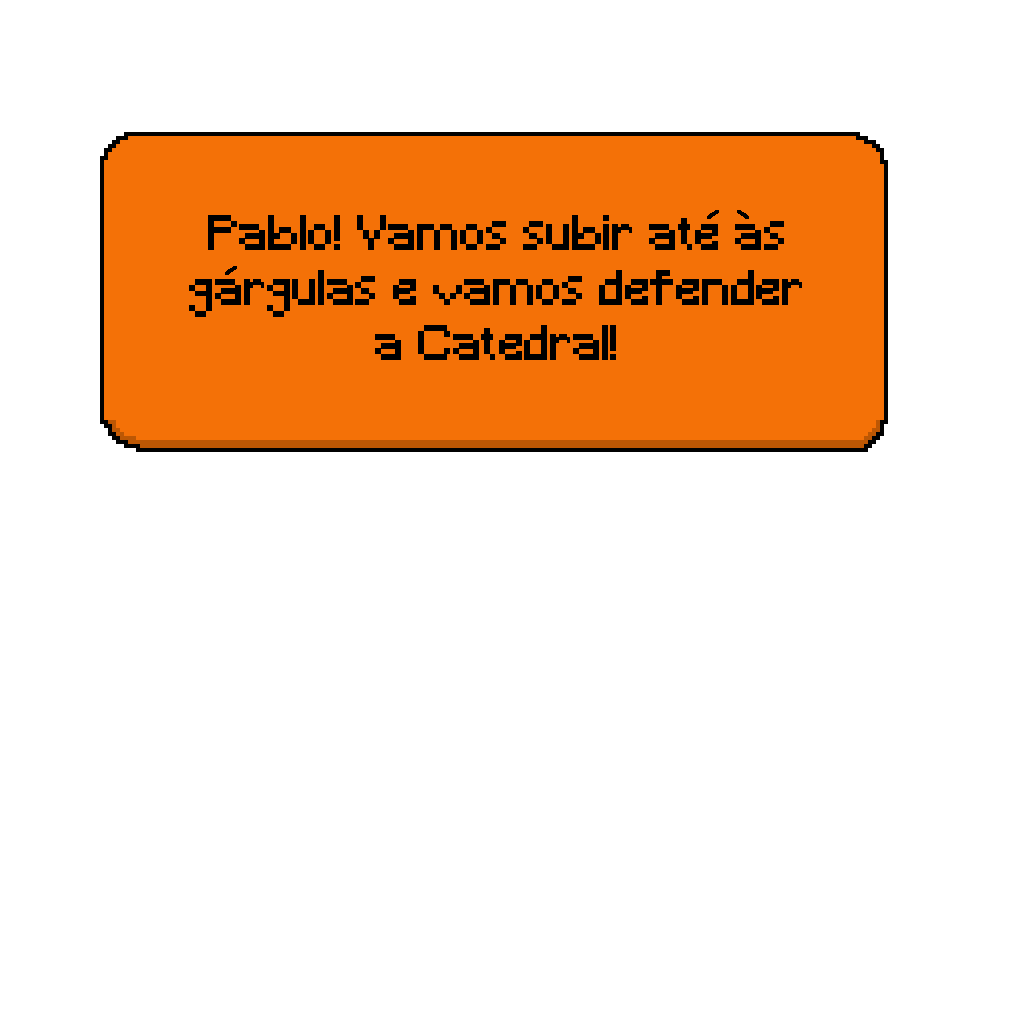
<style>
.page{position:relative;width:1024px;height:1024px;background:#ffffff}
.page>*{position:absolute;margin:0}
.t1{font:45.8px "Minecraft";color:#000000}
</style>
<div class="page">
<p class="t1" style="left:189px;top:215px;width:613px;height:145px;text-align:center">Pablo! Vamos subir ate as gargulas e vamos defender a Catedral!</p>
</div>
